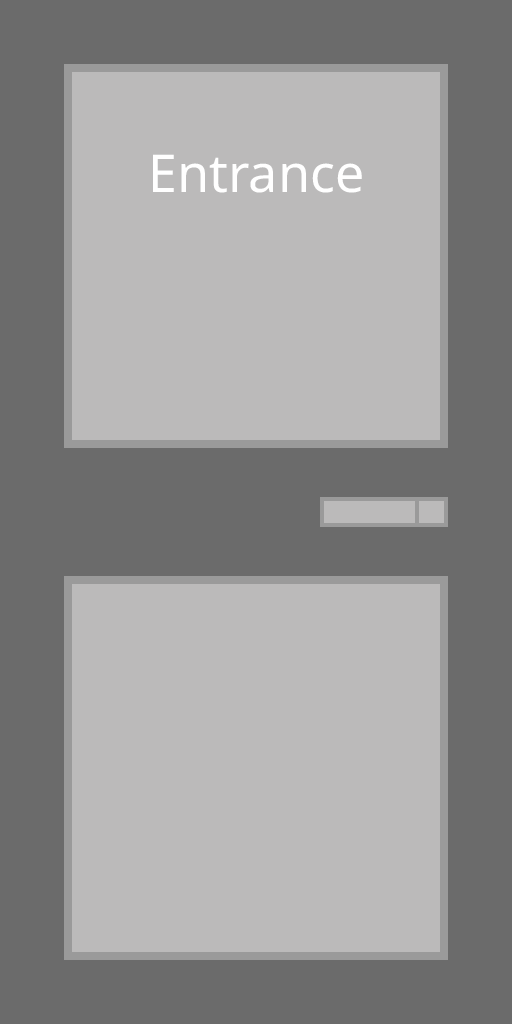
<style>
.page{position:relative;width:512px;height:1024px;background:#bbbaba}
.page>*{position:absolute;margin:0}
.t1{font:52px "NotoSans-Regular";color:#ffffff}
</style>
<div class="page">
<p class="t1" style="left:153px;top:154px;width:209px;height:39px">Entrance</p>
</div>
